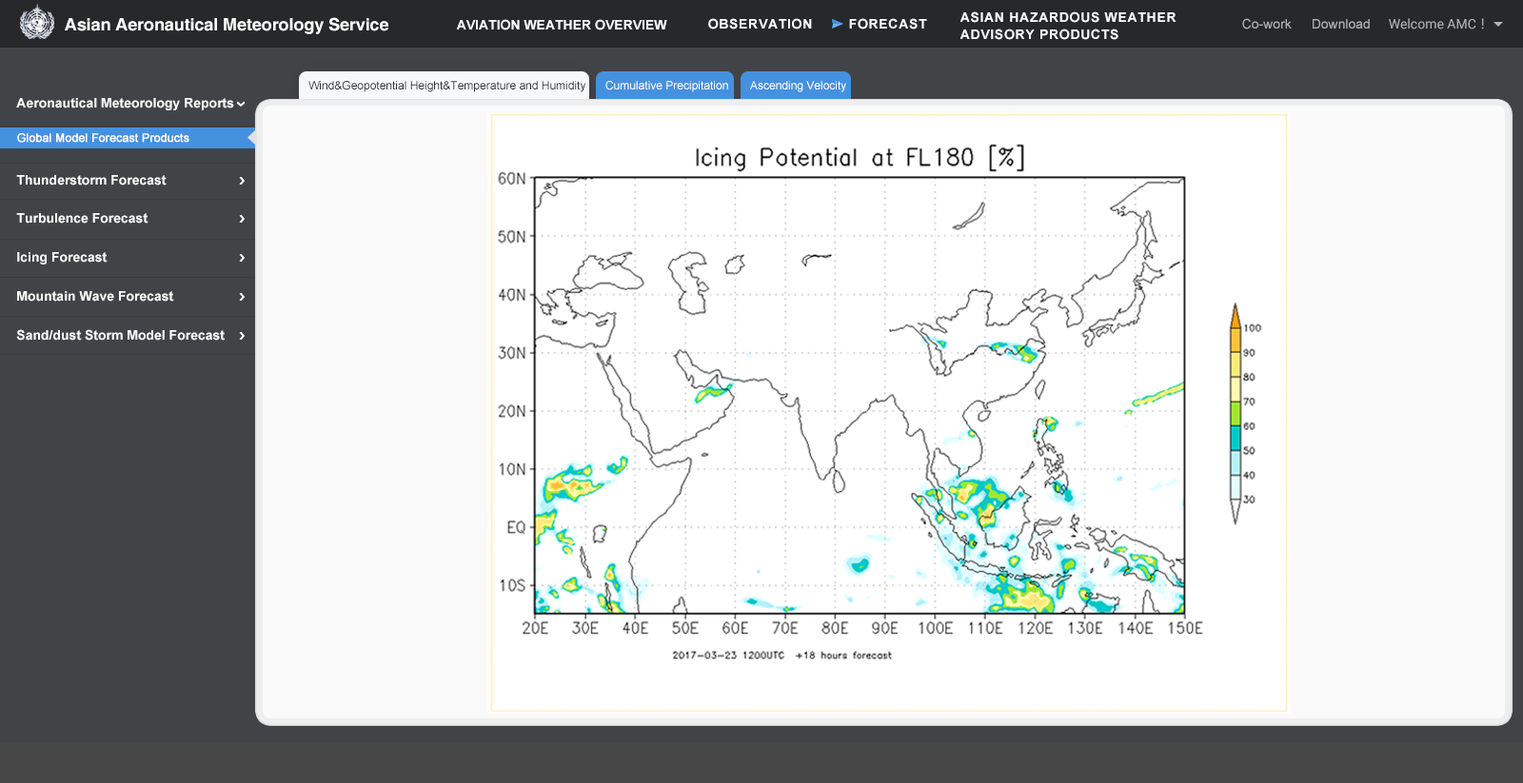
<style>
.page{position:relative;width:1523px;height:783px;background:#ffffff}
.page>*{position:absolute;margin:0}
.t1{font:17.1px "Helvetica-Bold";letter-spacing:-0.005em;color:#ffffff}
.t2{font:13.3px/17.1px "Arial-BoldMT";letter-spacing:0.05em;color:#fafafa}
.t3{font:13.3px "Arial-BoldMT";color:#fafafa}
.t4{font:13.3px "Arial-BoldMT";letter-spacing:0.05em;color:#fafafa}
.t5{font:13.3px "ArialMT";color:#b3b3b3}
.t6{font:13.3px "Roboto-Regular";color:#b3b3b3}
.t7{font:13.3px "MicrosoftYaHei";color:#b3b3b3}
.t8{font:11.4px "ArialMT";color:#2e2e2e}
.t9{font:11.4px "ArialMT";color:#ffffff}
.t10{font:11.4px "ArialMT";color:#ffffff;font-weight:bold}
</style>
<div class="page">
<p class="t1" style="left:65px;top:17px;width:323px;height:17px">Asian Aeronautical Meteorology Service</p>
<p class="t2" style="left:959px;top:11px;width:217px;height:29px">ASIAN HAZARDOUS WEATHER<br>ADVISORY PRODUCTS</p>
<p class="t3" style="left:456px;top:19px;width:211px;height:11px">AVIATION WEATHER OVERVIEW</p>
<p class="t4" style="left:708px;top:18px;width:104px;height:11px">OBSERVATION</p>
<p class="t4" style="left:849px;top:18px;width:78px;height:11px">FORECAST</p>
<p class="t5" style="left:1242px;top:18px;width:49px;height:11px">Co-work</p>
<p class="t5" style="left:1312px;top:19px;width:57px;height:10px">Download</p>
<p class="t6" style="left:1388px;top:18px;width:96px;height:11px">Welcome AMC<span class="t7">！</span></p>
<p class="t8" style="left:308px;top:81px;width:277px;height:11px">Wind&amp;Geopotential Height&amp;Temperature and Humidity</p>
<p class="t9" style="left:605px;top:81px;width:123px;height:11px">Cumulative Precipitation</p>
<p class="t9" style="left:750px;top:81px;width:96px;height:11px">Ascending Velocity</p>
<p class="t3" style="left:16px;top:98px;width:218px;height:12px">Aeronautical Meteorology Reports</p>
<p class="t10" style="left:17px;top:133px;width:172px;height:10px">Global Model Forecast Products</p>
<p class="t3" style="left:16px;top:175px;width:151px;height:11px">Thunderstorm Forecast</p>
<p class="t3" style="left:16px;top:213px;width:132px;height:11px">Turbulence Forecast</p>
<p class="t3" style="left:17px;top:252px;width:91px;height:13px">Icing Forecast</p>
<p class="t3" style="left:17px;top:291px;width:157px;height:11px">Mountain Wave Forecast</p>
<p class="t3" style="left:16px;top:329px;width:209px;height:12px">Sand/dust Storm Model Forecast</p>
</div>
